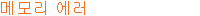
<style>
.page{position:relative;width:200px;height:16px;background:#ffffff}
.page>*{position:absolute;margin:0}
.t1{font:12px "Gulim";color:#f86f1e}
</style>
<div class="page">
<p class="t1" style="left:1px;top:1px;width:84px;height:14px">메모리 에러</p>
</div>
